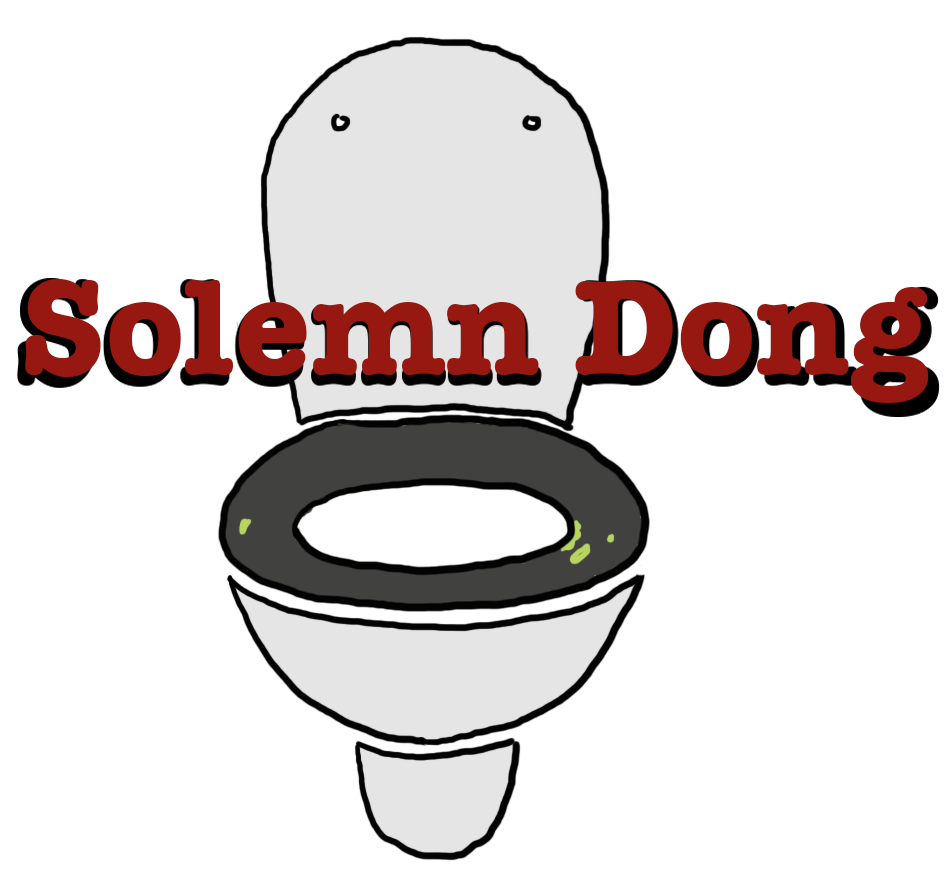
<style>
.page{position:relative;width:952px;height:876px;background:#ffffff}
.page>*{position:absolute;margin:0}
.t1{font:139px "AmericanTypewriter-Bold";color:#971811}
</style>
<div class="page">
<p class="t1" style="left:25px;top:279px;width:904px;height:124px">Solemn Dong</p>
</div>
